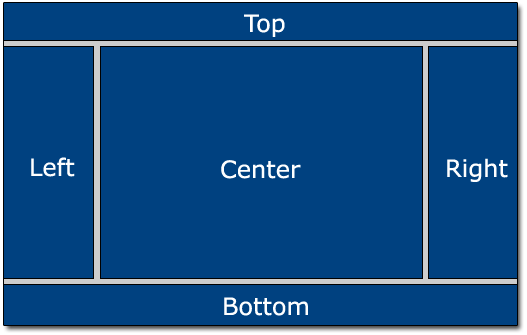
<style>
.page{position:relative;width:527px;height:335px;background:#004180}
.page>*{position:absolute;margin:0}
.t1{font:24px "Verdana";color:#ffffff}
</style>
<div class="page">
<p class="t1" style="left:244px;top:14px;width:41px;height:23px">Top</p>
<p class="t1" style="left:31px;top:157px;width:44px;height:20px">Left</p>
<p class="t1" style="left:221px;top:160px;width:80px;height:19px">Center</p>
<p class="t1" style="left:447px;top:158px;width:61px;height:24px">Right</p>
<p class="t1" style="left:224px;top:297px;width:84px;height:19px">Bottom</p>
</div>
